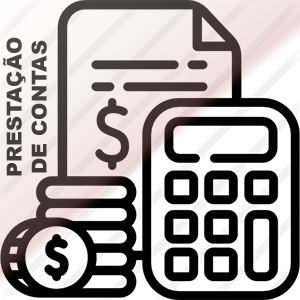
<style>
.page{position:relative;width:300px;height:300px}
.page>*{position:absolute;margin:0}
.t1{font:20.8px "Arial-Black";color:#474140}
</style>
<div class="page">
<p class="t1" style="left:3px;top:37px;width:44px;height:139px;text-align:center;rotate:-90deg">PRESTAÇÃO<br>DE CONTAS</p>
</div>
